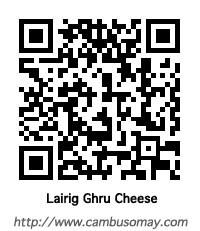
<style>
.page{position:relative;width:200px;height:231px;background:#ffffff}
.page>*{position:absolute;margin:0}
.t1{font:12px "Geneva";letter-spacing:-0.01em;color:#010101;font-weight:bold}
.t2{font:12px "Geneva";letter-spacing:-0.01em;color:#5f5d5d;font-style:italic}
</style>
<div class="page">
<p class="t1" style="left:47px;top:193px;width:111px;height:13px">Lairig Ghru Cheese</p>
<p class="t2" style="left:14px;top:216px;width:174px;height:13px">http://www.cambusomay.com</p>
</div>
